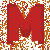
<style>
.page{position:relative;width:50px;height:50px;background:#c12424}
.page>*{position:absolute;margin:0}
.t1{font:55px "Troika";color:#c12424}
</style>
<div class="page">
<p class="t1" style="left:8px;top:6px;width:34px;height:36px">M</p>
</div>
